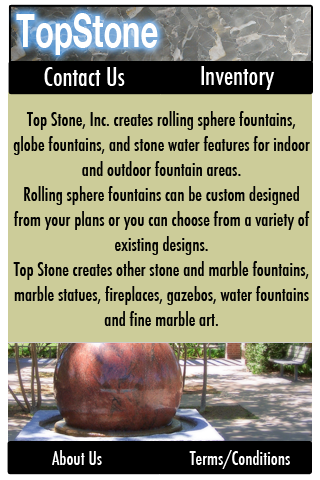
<style>
.page{position:relative;width:320px;height:480px;background:#cccc99}
.page>*{position:absolute;margin:0}
.t1{font:45.8px "HelveticaNeue-Bold";color:#ffffff;scale:0.67 1}
.t2{font:25px "Futura-CondensedMedium";color:#ffffff}
.t3{font:18px/25px "Futura-CondensedMedium";color:#000000}
.t4{font:18px "Futura-CondensedMedium";color:#ffffff}
</style>
<div class="page">
<p class="t1" style="left:16px;top:13px;width:142px;height:42px">TopStone</p>
<p class="t2" style="left:44px;top:67px;width:81px;height:19px">Contact Us</p>
<p class="t2" style="left:201px;top:66px;width:74px;height:24px">Inventory</p>
<p class="t3" style="left:13px;top:111px;width:297px;height:215px;text-align:center">Top Stone, Inc. creates rolling sphere fountains, globe fountains, and stone water features for indoor and outdoor fountain areas.<br>Rolling sphere fountains can be custom designed from your plans or you can choose from a variety of existing designs.<br>Top Stone creates other stone and marble fountains, marble statues, fireplaces, gazebos, water fountains and fine marble art.</p>
<p class="t4" style="left:52px;top:450px;width:50px;height:15px">About Us</p>
<p class="t4" style="left:189px;top:450px;width:101px;height:19px">Terms/Conditions</p>
</div>
